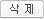
<style>
.page{position:relative;width:44px;height:19px}
.page>*{position:absolute;margin:0}
.t1{font:12px "morris9";color:#4f4f4f}
</style>
<div class="page">
<p class="t1" style="left:10px;top:4px;width:23px;height:10px">삭 제</p>
</div>
